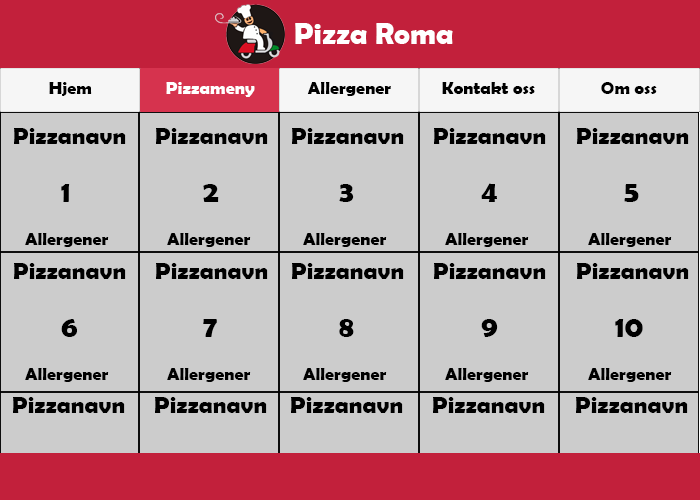
<style>
.page{position:relative;width:700px;height:500px;background:#cccccc}
.page>*{position:absolute;margin:0}
.t1{font:30px "BerlinSansFBDemi-Bold";color:#ffffff}
.t2{font:18px "BerlinSansFBDemi-Bold";color:#000000}
.t3{font:18px "BerlinSansFBDemi-Bold";color:#ffffff}
.t4{font:24px "BerlinSansFBDemi-Bold";color:#000000}
.t5{font:30px "BerlinSansFBDemi-Bold";color:#000000}
</style>
<div class="page">
<p class="t1" style="left:295px;top:23px;width:158px;height:21px">Pizza Roma</p>
<p class="t2" style="left:49px;top:82px;width:43px;height:14px">Hjem</p>
<p class="t3" style="left:166px;top:82px;width:89px;height:15px">Pizzameny</p>
<p class="t2" style="left:307px;top:82px;width:84px;height:14px">Allergener</p>
<p class="t2" style="left:442px;top:82px;width:93px;height:12px">Kontakt oss</p>
<p class="t2" style="left:601px;top:82px;width:56px;height:12px">Om oss</p>
<p class="t2" style="left:14px;top:128px;width:112px;height:119px"><span class="t4"> Pizzanavn<br><br>     </span><span class="t5">1  <br></span><br>    Allergener</p>
<p class="t2" style="left:156px;top:128px;width:112px;height:119px"><span class="t4"> Pizzanavn<br><br>     </span><span class="t5">2  <br></span><br>    Allergener</p>
<p class="t2" style="left:292px;top:128px;width:112px;height:119px"><span class="t4"> Pizzanavn<br><br>     </span><span class="t5">3  <br></span><br>    Allergener</p>
<p class="t2" style="left:434px;top:128px;width:112px;height:119px"><span class="t4"> Pizzanavn<br><br>     </span><span class="t5">4  <br></span><br>    Allergener</p>
<p class="t2" style="left:577px;top:128px;width:112px;height:119px"><span class="t4"> Pizzanavn<br><br>     </span><span class="t5">5  <br></span><br>    Allergener</p>
<p class="t2" style="left:14px;top:263px;width:112px;height:119px"><span class="t4"> Pizzanavn<br><br>     </span><span class="t5">6  <br></span><br>    Allergener</p>
<p class="t2" style="left:156px;top:263px;width:112px;height:119px"><span class="t4"> Pizzanavn<br><br>     </span><span class="t5">7  <br></span><br>    Allergener</p>
<p class="t2" style="left:292px;top:263px;width:112px;height:119px"><span class="t4"> Pizzanavn<br><br>     </span><span class="t5">8  <br></span><br>    Allergener</p>
<p class="t2" style="left:434px;top:263px;width:112px;height:119px"><span class="t4"> Pizzanavn<br><br>     </span><span class="t5">9  <br></span><br>    Allergener</p>
<p class="t2" style="left:577px;top:263px;width:112px;height:119px"><span class="t4"> Pizzanavn<br><br>   </span><span class="t5">10  <br></span><br>    Allergener</p>
</div>
